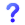
<style>
.page{position:relative;width:25px;height:25px;background:#ffffff}
.page>*{position:absolute;margin:0}
.t1{font:26px "ArialRoundedMTBold"}
</style>
<div class="page">
<p class="t1" style="left:6px;top:3px;width:14px;height:20px">?</p>
</div>
